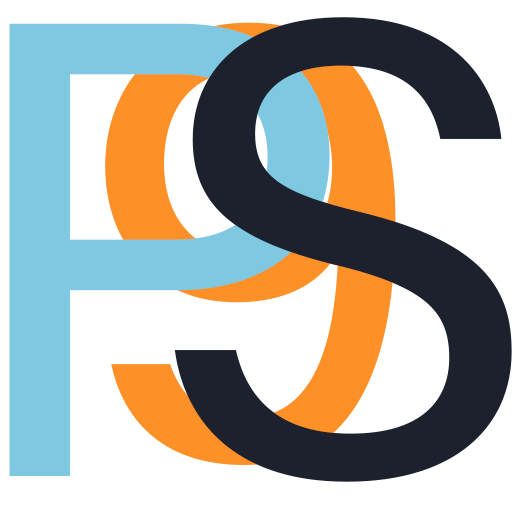
<style>
.page{position:relative;width:512px;height:512px;background:#ffffff}
.page>*{position:absolute;margin:0}
.t1{font:650px "AcuminConcept-Regular";letter-spacing:0.3em;color:#1c212d}
.t2{font:650px "AcuminConcept-Regular";letter-spacing:0.3em;color:#7fc8e1}
.t3{font:650px "AcuminConcept-Regular";letter-spacing:0.3em;color:#fe9028}
</style>
<div class="page">
<p class="t1" style="left:174px;top:17px;width:338px;height:465px">S<br><br><br><br><br><br>S</p>
<p class="t2" style="left:9px;top:23px;width:321px;height:453px">P</p>
<p class="t3" style="left:105px;top:22px;width:291px;height:443px">9</p>
</div>
